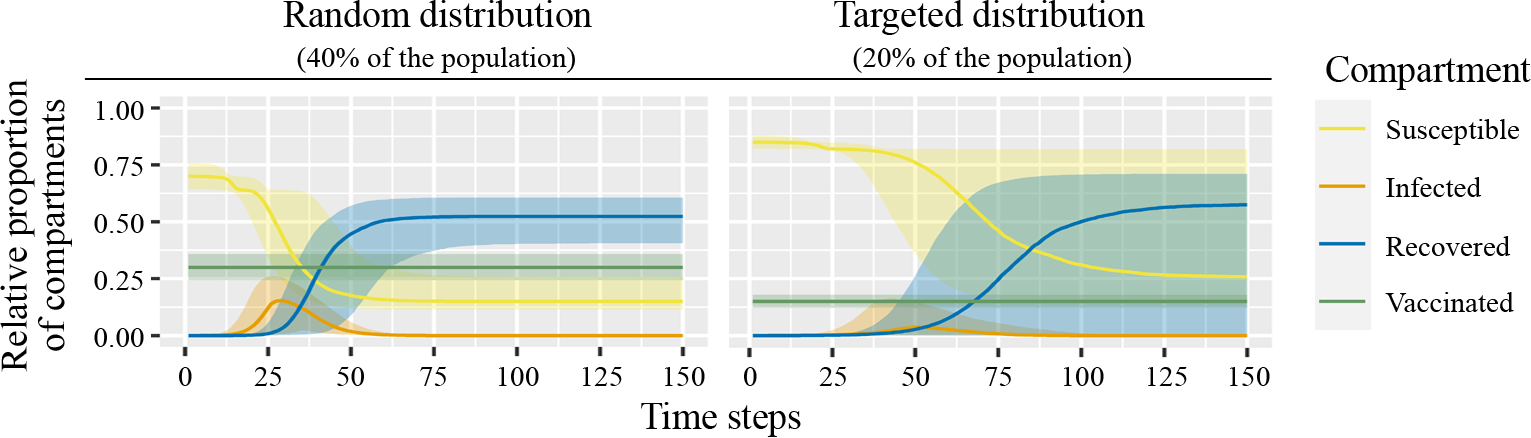
<style>
.page{position:relative;width:1531px;height:438px;background:#ffffff}
.page>*{position:absolute;margin:0}
.t1{font:37.5px "TimesNewRomanPSMT";color:#010101}
.t2{font:29.2px "TimesNewRomanPSMT";color:#010101}
.t3{font:37.5px/37.5px "TimesNewRomanPSMT";color:#010101}
</style>
<div class="page">
<p class="t1" style="left:283px;top:0px;width:309px;height:27px">Random distribution</p>
<p class="t1" style="left:834px;top:0px;width:311px;height:35px">Targeted distribution</p>
<p class="t2" style="left:297px;top:47px;width:278px;height:26px">(40% of the population)</p>
<p class="t2" style="left:853px;top:47px;width:278px;height:26px">(20% of the population)</p>
<p class="t1" style="left:1326px;top:56px;width:205px;height:34px">Compartment</p>
<p class="t3" style="left:0px;top:79px;width:72px;height:293px;text-align:center;rotate:-90deg">Relative proportion<br>of compartments</p>
<p class="t2" style="left:97px;top:101px;width:47px;height:19px">1.00</p>
<p class="t2" style="left:1387px;top:119px;width:132px;height:26px">Susceptible</p>
<p class="t2" style="left:94px;top:157px;width:49px;height:19px">0.75</p>
<p class="t2" style="left:1386px;top:177px;width:96px;height:20px">Infected</p>
<p class="t2" style="left:94px;top:214px;width:50px;height:19px">0.50</p>
<p class="t2" style="left:1386px;top:236px;width:125px;height:20px">Recovered</p>
<p class="t2" style="left:94px;top:271px;width:49px;height:19px">0.25</p>
<p class="t2" style="left:1385px;top:292px;width:129px;height:20px">Vaccinated</p>
<p class="t2" style="left:94px;top:328px;width:50px;height:19px">0.00</p>
<p class="t2" style="left:179px;top:367px;width:13px;height:19px">0</p>
<p class="t2" style="left:254px;top:367px;width:27px;height:19px">25</p>
<p class="t2" style="left:337px;top:367px;width:27px;height:19px">50</p>
<p class="t2" style="left:420px;top:367px;width:26px;height:19px">75</p>
<p class="t2" style="left:499px;top:367px;width:40px;height:19px">100</p>
<p class="t2" style="left:583px;top:367px;width:39px;height:19px">125</p>
<p class="t2" style="left:665px;top:367px;width:40px;height:19px">150</p>
<p class="t2" style="left:744px;top:367px;width:13px;height:19px">0</p>
<p class="t2" style="left:819px;top:367px;width:27px;height:19px">25</p>
<p class="t2" style="left:902px;top:367px;width:27px;height:19px">50</p>
<p class="t2" style="left:985px;top:367px;width:26px;height:19px">75</p>
<p class="t2" style="left:1064px;top:367px;width:40px;height:19px">100</p>
<p class="t2" style="left:1148px;top:367px;width:39px;height:19px">125</p>
<p class="t2" style="left:1230px;top:367px;width:40px;height:19px">150</p>
<p class="t1" style="left:641px;top:402px;width:160px;height:35px">Time steps</p>
</div>
